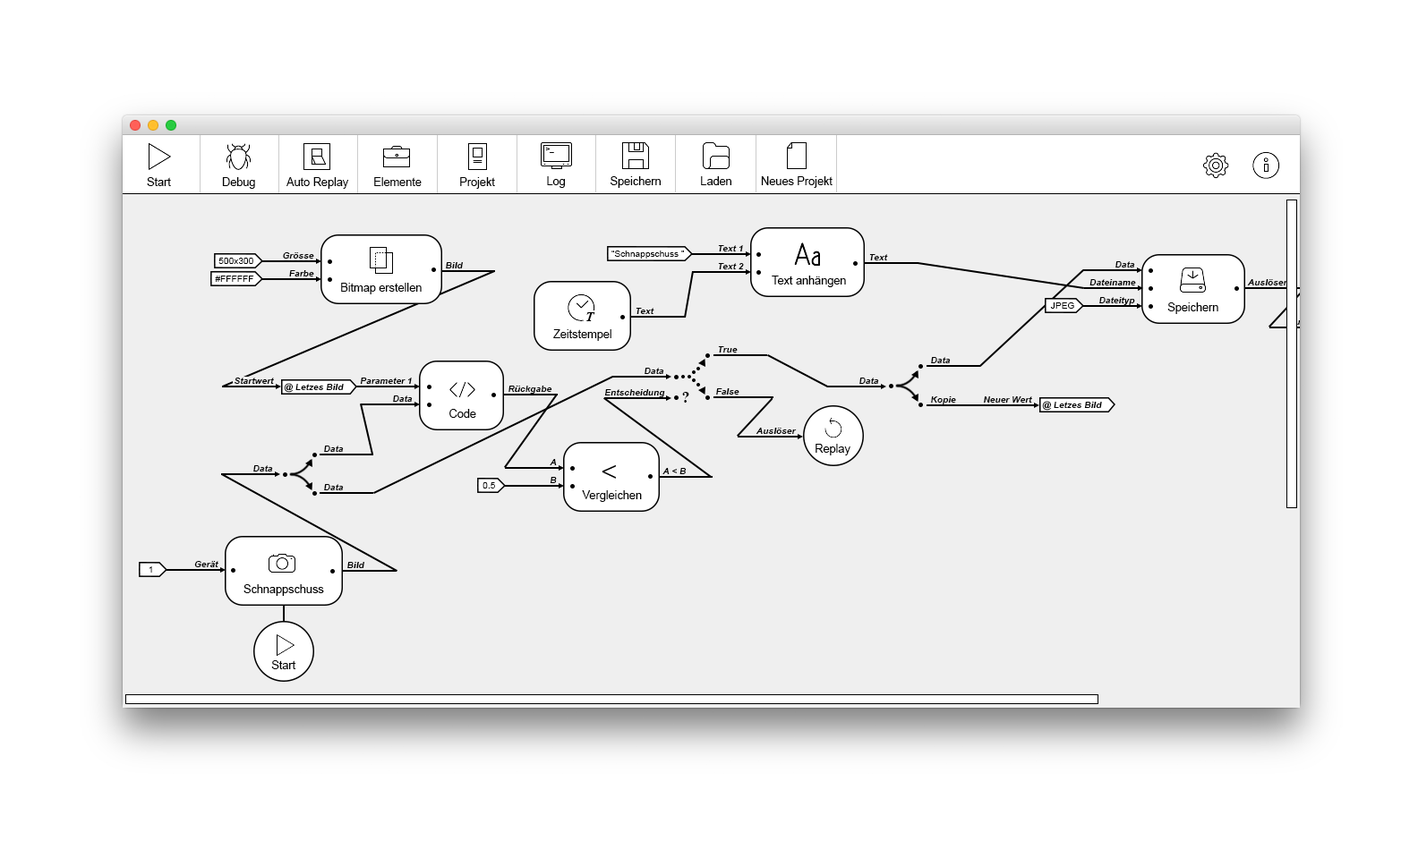
<style>
.page{position:relative;width:1418px;height:841px;background:#efefef}
.page>*{position:absolute;margin:0}
.t1{font:6.8px "ArialMT";color:#000000}
.t2{font:11.4px "ArialMT";color:#000000}
.t3{font:9.1px "Arial-BoldItalicMT";color:#000000}
.t4{font:9.1px "ArialMT";color:#000000}
.t5{font:13.6px "TimesNewRomanPS-BoldItalicMT";color:#000000}
.t6{font:15.9px "TimesNewRomanPS-BoldMT";color:#000000}
.t7{font:27.3px "Helvetica-Light";color:#000000}
</style>
<div class="page">
<p class="t1" style="left:546px;top:148px;width:8px;height:5px">&gt;_</p>
<p class="t2" style="left:147px;top:177px;width:24px;height:9px">Start</p>
<p class="t2" style="left:222px;top:177px;width:33px;height:12px">Debug</p>
<p class="t2" style="left:286px;top:177px;width:63px;height:12px">Auto Replay</p>
<p class="t2" style="left:374px;top:177px;width:47px;height:9px">Elemente</p>
<p class="t2" style="left:460px;top:177px;width:35px;height:12px">Projekt</p>
<p class="t2" style="left:547px;top:176px;width:18px;height:12px">Log</p>
<p class="t2" style="left:610px;top:176px;width:50px;height:12px">Speichern</p>
<p class="t2" style="left:701px;top:176px;width:30px;height:9px">Laden</p>
<p class="t2" style="left:761px;top:176px;width:71px;height:12px">Neues Projekt</p>
<p class="t3" style="left:718px;top:245px;width:25px;height:6px">Text 1</p>
<p class="t4" style="left:218px;top:258px;width:35px;height:6px">500x300</p>
<p class="t3" style="left:283px;top:252px;width:31px;height:7px">Grösse</p>
<p class="t4" style="left:611px;top:251px;width:73px;height:8px">“Schnappschuss ”</p>
<p class="t3" style="left:869px;top:254px;width:19px;height:6px">Text</p>
<p class="t3" style="left:446px;top:262px;width:17px;height:6px">Bild</p>
<p class="t3" style="left:718px;top:263px;width:26px;height:6px">Text 2</p>
<p class="t3" style="left:1115px;top:261px;width:20px;height:7px">Data</p>
<p class="t4" style="left:215px;top:276px;width:39px;height:6px">#FFFFFF</p>
<p class="t3" style="left:289px;top:270px;width:25px;height:7px">Farbe</p>
<p class="t2" style="left:771px;top:276px;width:75px;height:11px">Text anhängen</p>
<p class="t3" style="left:1089px;top:279px;width:47px;height:6px">Dateiname</p>
<p class="t3" style="left:1247px;top:279px;width:41px;height:6px">Auslöser</p>
<p class="t2" style="left:341px;top:283px;width:80px;height:11px">Bitmap erstellen</p>
<p class="t4" style="left:1050px;top:302px;width:24px;height:7px">JPEG</p>
<p class="t3" style="left:1099px;top:297px;width:36px;height:8px">Dateityp</p>
<p class="t2" style="left:1167px;top:302px;width:51px;height:12px">Speichern</p>
<p class="t5" style="left:586px;top:312px;width:9px;height:9px">T</p>
<p class="t3" style="left:635px;top:308px;width:19px;height:6px">Text</p>
<p class="t2" style="left:553px;top:329px;width:58px;height:12px">Zeitstempel</p>
<p class="t3" style="left:718px;top:346px;width:19px;height:7px">True</p>
<p class="t3" style="left:931px;top:357px;width:19px;height:6px">Data</p>
<p class="t3" style="left:234px;top:378px;width:40px;height:6px">Startwert</p>
<p class="t3" style="left:360px;top:378px;width:52px;height:6px">Parameter 1</p>
<p class="t3" style="left:644px;top:368px;width:20px;height:6px">Data</p>
<p class="t3" style="left:859px;top:378px;width:20px;height:6px">Data</p>
<p class="t3" style="left:284px;top:383px;width:60px;height:10px">@ Letzes Bild</p>
<p class="t3" style="left:508px;top:386px;width:44px;height:8px">Rückgabe</p>
<p class="t3" style="left:604px;top:389px;width:61px;height:8px">Entscheidung</p>
<p class="t3" style="left:716px;top:388px;width:23px;height:7px">False</p>
<p class="t3" style="left:393px;top:396px;width:20px;height:6px">Data</p>
<p class="t6" style="left:682px;top:392px;width:7px;height:11px">?</p>
<p class="t3" style="left:931px;top:396px;width:25px;height:8px">Kopie</p>
<p class="t3" style="left:983px;top:396px;width:49px;height:7px">Neuer Wert</p>
<p class="t3" style="left:1042px;top:401px;width:60px;height:10px">@ Letzes Bild</p>
<p class="t2" style="left:449px;top:409px;width:27px;height:9px">Code</p>
<p class="t3" style="left:755px;top:428px;width:41px;height:6px">Auslöser</p>
<p class="t3" style="left:324px;top:446px;width:20px;height:6px">Data</p>
<p class="t2" style="left:815px;top:444px;width:35px;height:12px">Replay</p>
<p class="t3" style="left:549px;top:459px;width:8px;height:6px">A</p>
<p class="t3" style="left:253px;top:465px;width:20px;height:7px">Data</p>
<p class="t7" style="left:601px;top:464px;width:15px;height:15px">&lt;</p>
<p class="t3" style="left:662px;top:468px;width:24px;height:6px">A &lt; B</p>
<p class="t3" style="left:324px;top:484px;width:20px;height:6px">Data</p>
<p class="t4" style="left:482px;top:482px;width:13px;height:7px">0.5</p>
<p class="t3" style="left:549px;top:477px;width:8px;height:6px">B</p>
<p class="t2" style="left:582px;top:490px;width:60px;height:12px">Vergleichen</p>
<p class="t4" style="left:149px;top:566px;width:3px;height:7px">1</p>
<p class="t3" style="left:194px;top:561px;width:24px;height:6px">Gerät</p>
<p class="t3" style="left:347px;top:562px;width:17px;height:6px">Bild</p>
<p class="t2" style="left:243px;top:584px;width:81px;height:12px">Schnappschuss</p>
<p class="t2" style="left:271px;top:660px;width:25px;height:9px">Start</p>
</div>
